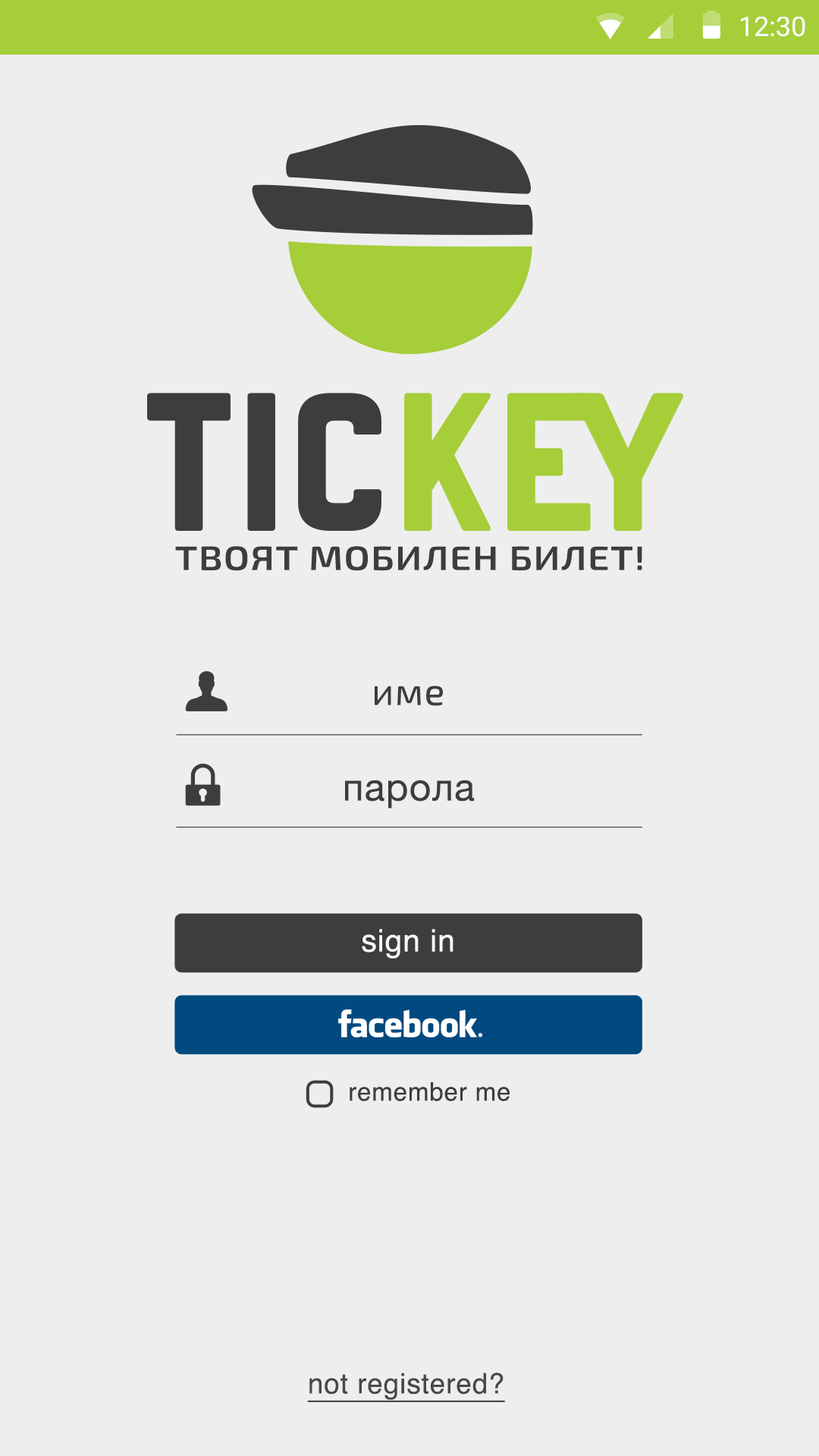
<style>
.page{position:relative;width:819px;height:1456px;background:#eeeeee}
.page>*{position:absolute;margin:0}
.t1{font:27.3px "Roboto-Regular";color:#ffffff}
.t2{font:33.8px "Exo2-SemiBold";letter-spacing:0.025em;color:#3c3d3d;text-transform:uppercase;scale:1.14 1}
.t3{font:38.2px "Exo2-Regular";letter-spacing:0.025em;color:#3c3d3d}
.t4{font:38.2px "HelveticaNeue";letter-spacing:0.025em;color:#3c3d3d}
.t5{font:31.1px "Helvetica";letter-spacing:0.025em;color:#ffffff}
.t6{font:25.3px "Helvetica";letter-spacing:0.025em;color:#3c3d3d}
.t7{font:28.3px "Helvetica";letter-spacing:0.025em;color:#3c3d3d;text-decoration:underline}
</style>
<div class="page">
<p class="t1" style="left:741px;top:17px;width:64px;height:19px">12:30</p>
<p class="t2" style="left:175px;top:546px;width:467px;height:25px">Твоят мобилен билет!</p>
<p class="t3" style="left:375px;top:686px;width:68px;height:20px">име</p>
<p class="t4" style="left:345px;top:780px;width:130px;height:28px">парола</p>
<p class="t5" style="left:362px;top:929px;width:91px;height:30px;opacity:0.96">sign in</p>
<p class="t6" style="left:350px;top:1082px;width:160px;height:19px">remember me</p>
<p class="t7" style="left:307px;top:1373px;width:198px;height:29px;opacity:0.96">not registered?</p>
</div>
